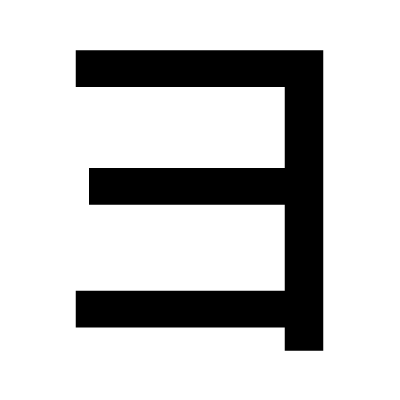
<style>
.page{position:relative;width:400px;height:400px;background:#ffffff}
.page>*{position:absolute;margin:0}
.t1{font:424.8px "MS-PGothic";color:#000000}
</style>
<div class="page">
<p class="t1" style="left:75px;top:50px;width:249px;height:301px">ヨ</p>
</div>
